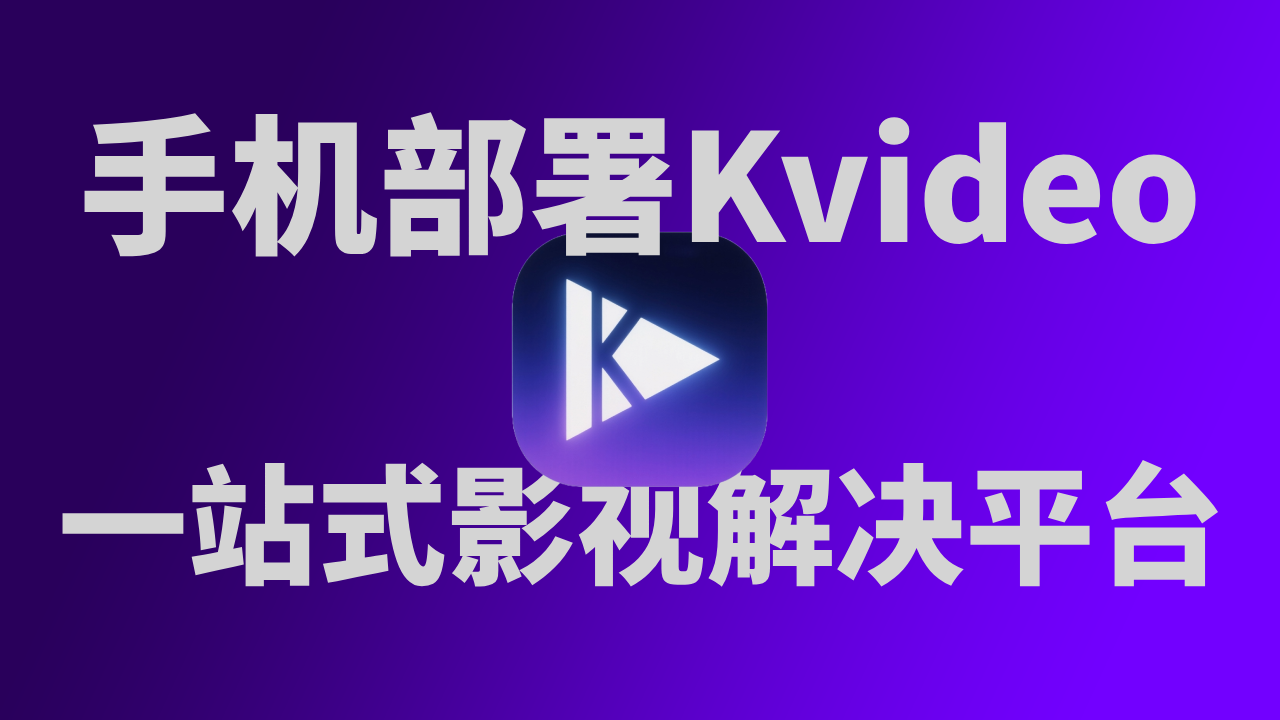
<style>
.page{position:relative;width:1280px;height:720px}
.page>*{position:absolute;margin:0}
.t1{font:150px "SourceHanSansSC-Heavy";color:#d4d4d4}
.t2{font:129.6px "SourceHanSansSC-Heavy";color:#d4d4d4}
</style>
<div class="page">
<p class="t1" style="left:84px;top:112px;width:1112px;height:145px">手机部署Kvideo</p>
<p class="t2" style="left:62px;top:460px;width:1156px;height:127px">一站式影视解决平台</p>
</div>
